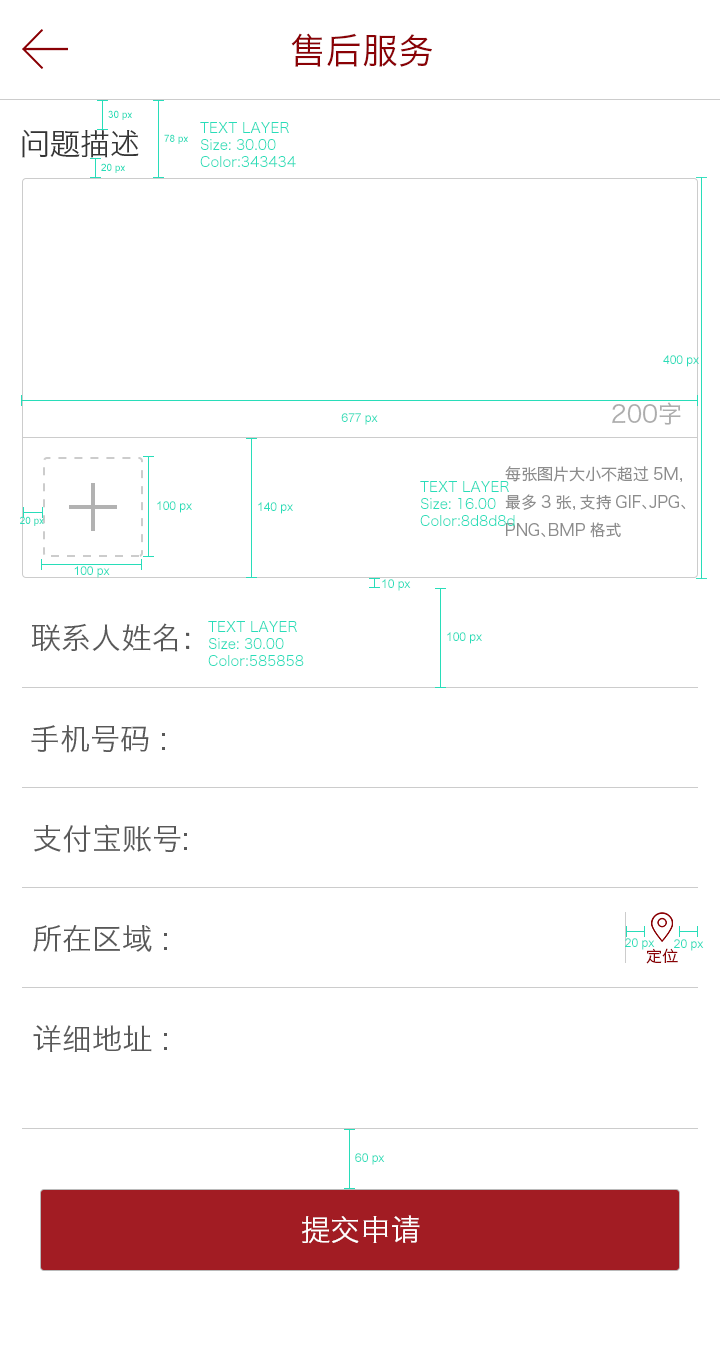
<style>
.page{position:relative;width:720px;height:1371px;background:#ffffff}
.page>*{position:absolute;margin:0}
.t1{font:36px "HiraginoSansGB-W3";color:#8a0105}
.t2{font:10px "ArialMT";color:#28ddb9}
.t3{font:14px "HiraginoSansGB-W3";color:#28ddb9}
.t4{font:30px "HiraginoSansGB-W3";color:#343434}
.t5{font:12px "ArialMT";color:#28ddb9}
.t6{font:24px "HiraginoSansGB-W3";color:#adadad}
.t7{font:16px "HiraginoSansGB-W3";color:#8d8d8d}
.t8{font:30px "HiraginoSansGB-W3";color:#585858}
.t9{font:16px "HiraginoSansGB-W3";color:#8a0105}
.t10{font:30px "HiraginoSansGB-W3";color:#ffffff}
</style>
<div class="page">
<p class="t1" style="left:291px;top:33px;width:141px;height:34px">售后服务</p>
<p class="t2" style="left:108px;top:110px;width:24px;height:10px">30 px</p>
<p class="t3" style="left:200px;top:122px;width:96px;height:45px">TEXT LAYER<br>Size: 30.00<br>Color:343434</p>
<p class="t4" style="left:22px;top:129px;width:117px;height:29px">问题描述</p>
<p class="t2" style="left:164px;top:134px;width:24px;height:10px">78 px</p>
<p class="t2" style="left:101px;top:163px;width:24px;height:10px">20 px</p>
<p class="t5" style="left:663px;top:355px;width:36px;height:12px">400 px</p>
<p class="t5" style="left:341px;top:413px;width:37px;height:12px">677 px</p>
<p class="t6" style="left:612px;top:402px;width:69px;height:23px">200字</p>
<p class="t7" style="left:505px;top:466px;width:181px;height:72px">每张图片大小不超过5M，最多3张，支持GIF、JPG、PNG、BMP格式</p>
<p class="t3" style="left:420px;top:481px;width:95px;height:45px">TEXT LAYER<br>Size: 16.00<br>Color:8d8d8d</p>
<p class="t5" style="left:157px;top:501px;width:35px;height:12px">100 px</p>
<p class="t5" style="left:258px;top:502px;width:35px;height:12px">140 px</p>
<p class="t2" style="left:20px;top:516px;width:24px;height:10px">20 px</p>
<p class="t5" style="left:74px;top:566px;width:36px;height:12px">100 px</p>
<p class="t5" style="left:382px;top:579px;width:29px;height:12px">10 px</p>
<p class="t8" style="left:31px;top:623px;width:159px;height:29px">联系人姓名：</p>
<p class="t3" style="left:208px;top:621px;width:96px;height:45px">TEXT LAYER<br>Size: 30.00<br>Color:585858</p>
<p class="t5" style="left:447px;top:632px;width:35px;height:12px">100 px</p>
<p class="t8" style="left:31px;top:725px;width:134px;height:28px">手机号码 :</p>
<p class="t8" style="left:34px;top:824px;width:153px;height:29px">支付宝账号:</p>
<p class="t8" style="left:33px;top:925px;width:134px;height:27px">所在区域 :</p>
<p class="t5" style="left:625px;top:938px;width:30px;height:12px">20 px</p>
<p class="t5" style="left:674px;top:939px;width:30px;height:12px">20 px</p>
<p class="t9" style="left:646px;top:948px;width:32px;height:16px">定位</p>
<p class="t8" style="left:33px;top:1025px;width:134px;height:27px">详细地址 :</p>
<p class="t5" style="left:355px;top:1153px;width:30px;height:12px">60 px</p>
<p class="t10" style="left:302px;top:1215px;width:118px;height:29px">提交申请</p>
</div>
